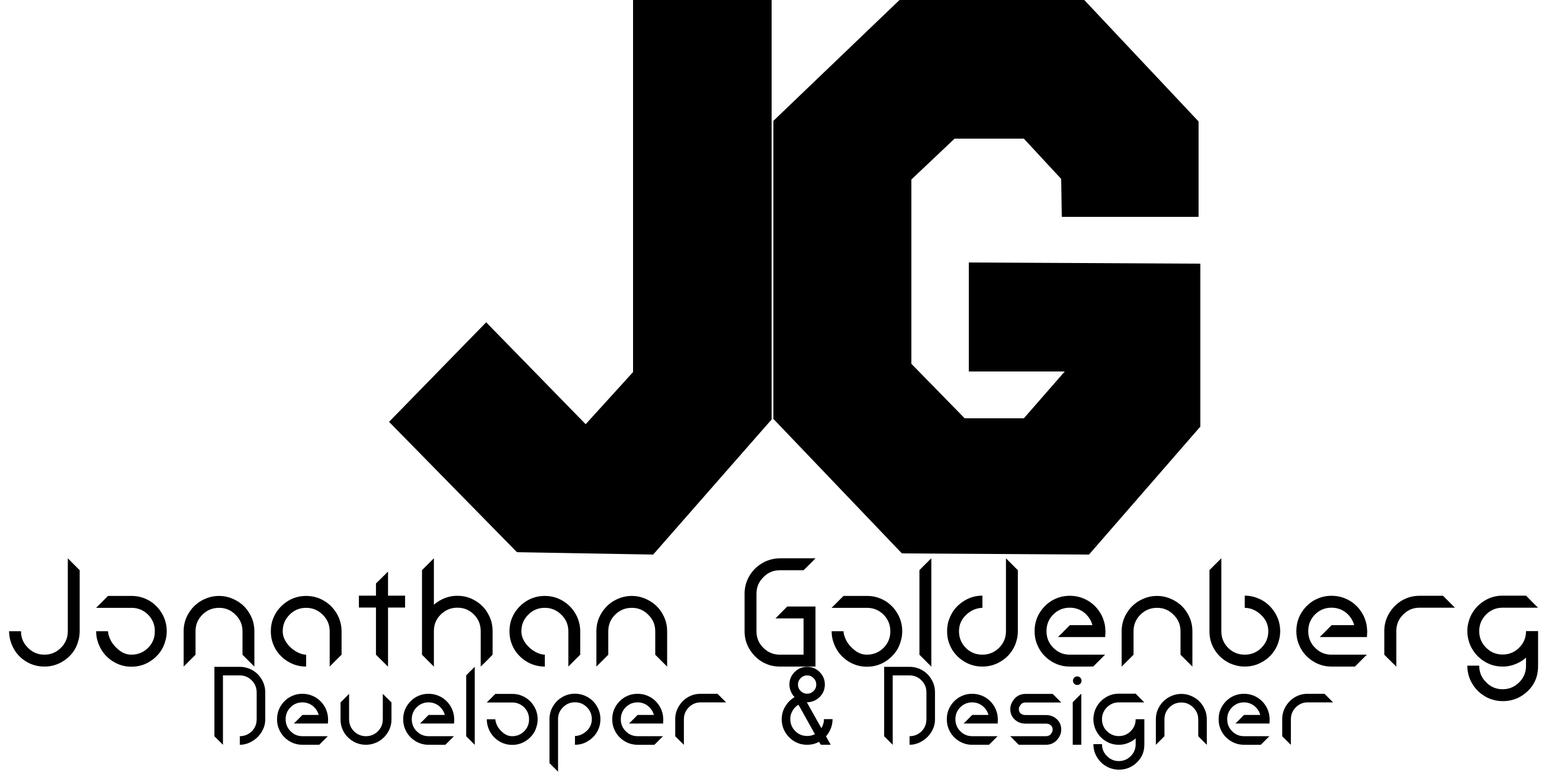
<style>
.page{position:relative;width:1545px;height:772px;background:#ffffff}
.page>*{position:absolute;margin:0}
.t1{font:148.3px "android_insomnia";letter-spacing:-0.01em;color:#000000}
.t2{font:106.6px "android_insomnia";letter-spacing:-0.01em;color:#000000}
</style>
<div class="page">
<p class="t1" style="left:9px;top:558px;width:1530px;height:143px">Jonathan Goldenberg</p>
<p class="t2" style="left:214px;top:666px;width:1120px;height:106px">Developer &amp; Designer</p>
</div>
